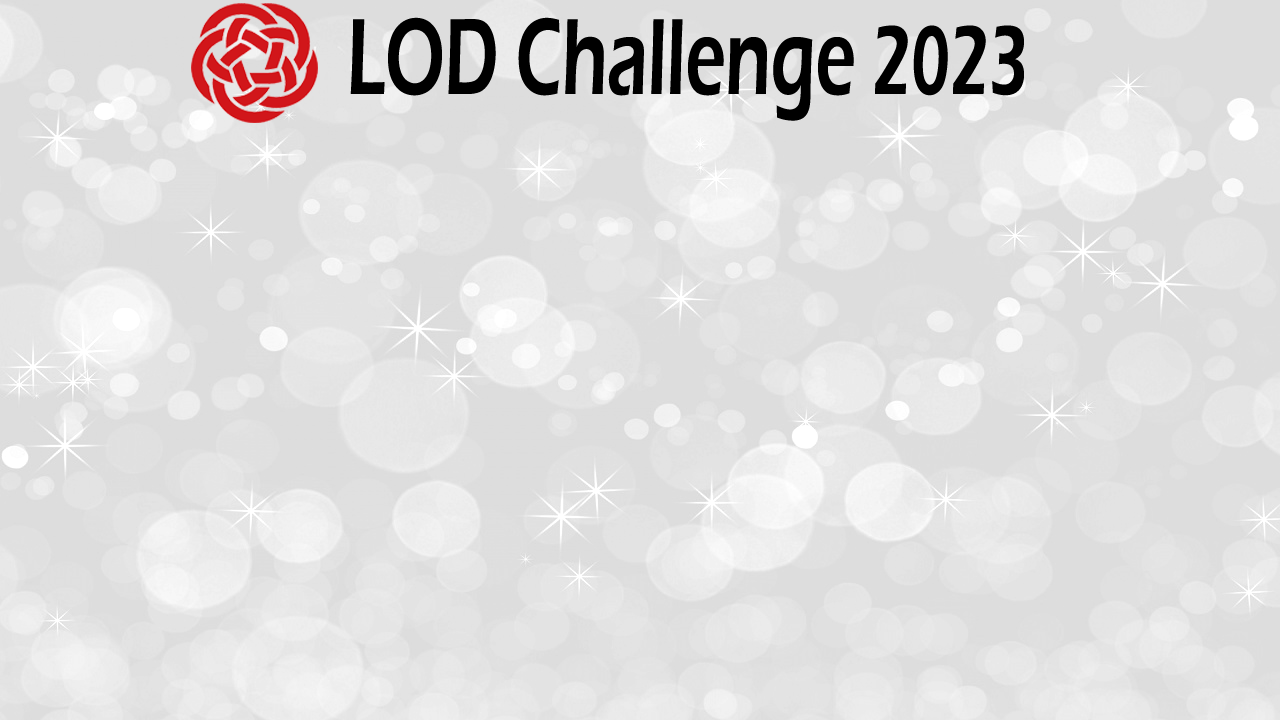
<style>
.page{position:relative;width:1280px;height:720px;background:#dddddd}
.page>*{position:absolute;margin:0}
.t1{font:112.1px "ErasITC-Demi";color:#000000;scale:0.63 1}
.t2{font:100.9px "ErasITC-Demi";color:#000000;scale:0.63 1}
</style>
<div class="page">
<p class="t1" style="left:350px;top:17px;width:674px;height:104px">LOD Challenge <span class="t2">2023</span></p>
</div>
